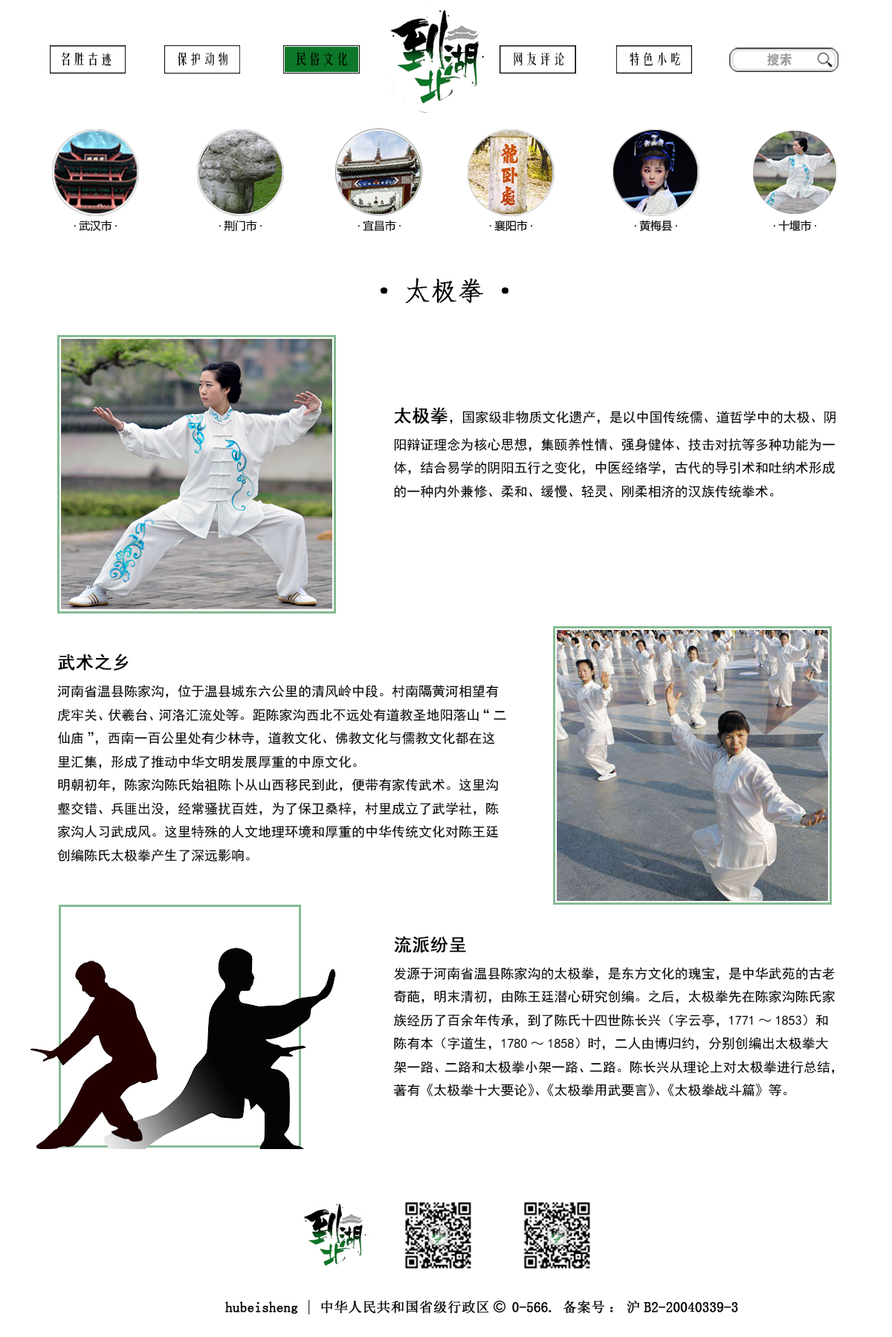
<style>
.page{position:relative;width:892px;height:1337px;background:#ffffff}
.page>*{position:absolute;margin:0}
.t1{font:13.6px "FZYTK--GBK1-0";color:#000000}
.t2{font:26.7px "·ÂËÎ";color:#000000;font-weight:bold}
.t3{font:13.4px "SimHei";color:#000000}
.t4{font:17.8px "SimHei";color:#000000;font-weight:bold}
</style>
<div class="page">
<p class="t1" style="left:61px;top:52px;width:50px;height:14px">名胜古迹</p>
<p class="t1" style="left:178px;top:52px;width:49px;height:14px">保护动物</p>
<p class="t1" style="left:296px;top:52px;width:51px;height:14px">民俗文化</p>
<p class="t1" style="left:513px;top:52px;width:51px;height:14px">网友评论</p>
<p class="t1" style="left:629px;top:52px;width:51px;height:14px">特色小吃</p>
<p class="t2" style="left:380px;top:278px;width:128px;height:25px">·太极拳·</p>
<p class="t3" style="left:394px;top:407px;width:442px;height:92px"><span class="t4">太极拳</span>，国家级非物质文化遗产， 是以中国传统儒、道哲学中的太极、阴阳辩证理念为核心思想，集颐养性情、强身健体、技击对抗等多种功能为一体，结合易学的阴阳五行之变化，中医经络学，古代的导引术和吐纳术形成的一种内外兼修、柔和、缓慢、轻灵、刚柔相济的汉族传统拳术。</p>
<p class="t3" style="left:57px;top:654px;width:449px;height:208px"><span class="t4">武术之乡<br></span>河南省温县陈家沟，位于温县城东六公里的清风岭中段。村南隔黄河相望有虎牢关、伏羲台、河洛汇流处等。距陈家沟西北不远处有道教圣地阳落山“二仙庙”，西南一百公里处有少林寺，道教文化、佛教文化与儒教文化都在这里汇集，形成了推动中华文明发展厚重的中原文化。<br>明朝初年，陈家沟陈氏始祖陈卜从山西移民到此，便带有家传武术。这里沟壑交错、兵匪出没，经常骚扰百姓，为了保卫桑梓，村里成立了武学社，陈家沟人习武成风。这里特殊的人文地理环境和厚重的中华传统文化对陈王廷创编陈氏太极拳产生了深远影响。</p>
<p class="t3" style="left:393px;top:936px;width:441px;height:161px"><span class="t4">流派纷呈<br></span>发源于河南省温县陈家沟的太极拳，是东方文化的瑰宝，是中华武苑的古老奇葩，明末清初，由陈王廷潜心研究创编。之后，太极拳先在陈家沟陈氏家族经历了百余年传承，到了陈氏十四世陈长兴（字云亭，1771～1853）和陈有本（字道生，1780～1858）时，二人由博归约，分别创编出太极拳大架一路、二路和太极拳小架一路、二路。陈长兴从理论上对太极拳进行总结，著有《太极拳十大要论》、《太极拳用武要言》、《太极拳战斗篇》等。</p>
</div>
